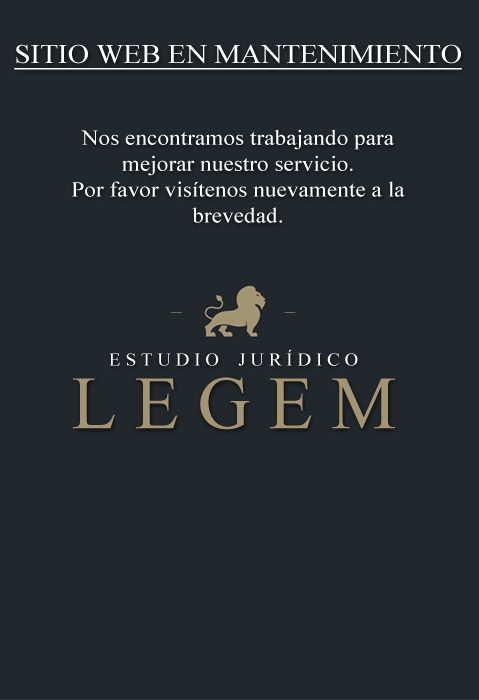
<style>
.page{position:relative;width:479px;height:700px;background:#22272c}
.page>*{position:absolute;margin:0}
.t1{font:27px "TimesNewRomanPSMT";color:#ffffff;text-decoration:underline;scale:1.08 1}
.t2{font:21.6px "TimesNewRomanPSMT";color:#ffffff;scale:1.08 1}
.t3{font:17.6px "TimesNewRomanPSMT";color:#ffffff;scale:1.08 1}
.t4{font:75.1px "TimesNewRomanPSMT";color:#a39474}
</style>
<div class="page">
<p class="t1" style="left:14px;top:44px;width:448px;height:26px">SITIO WEB EN MANTENIMIENTO</p>
<p class="t2" style="left:71px;top:129px;width:334px;height:94px;text-align:center">Nos encontramos trabajando para mejorar nuestro servicio.<br>Por favor visítenos nuevamente a la brevedad.</p>
<p class="t3" style="left:109px;top:349px;width:249px;height:17px">E S T U D I O    J U R Í D I C O</p>
<p class="t4" style="left:73px;top:377px;width:322px;height:53px">L E G E M</p>
</div>
